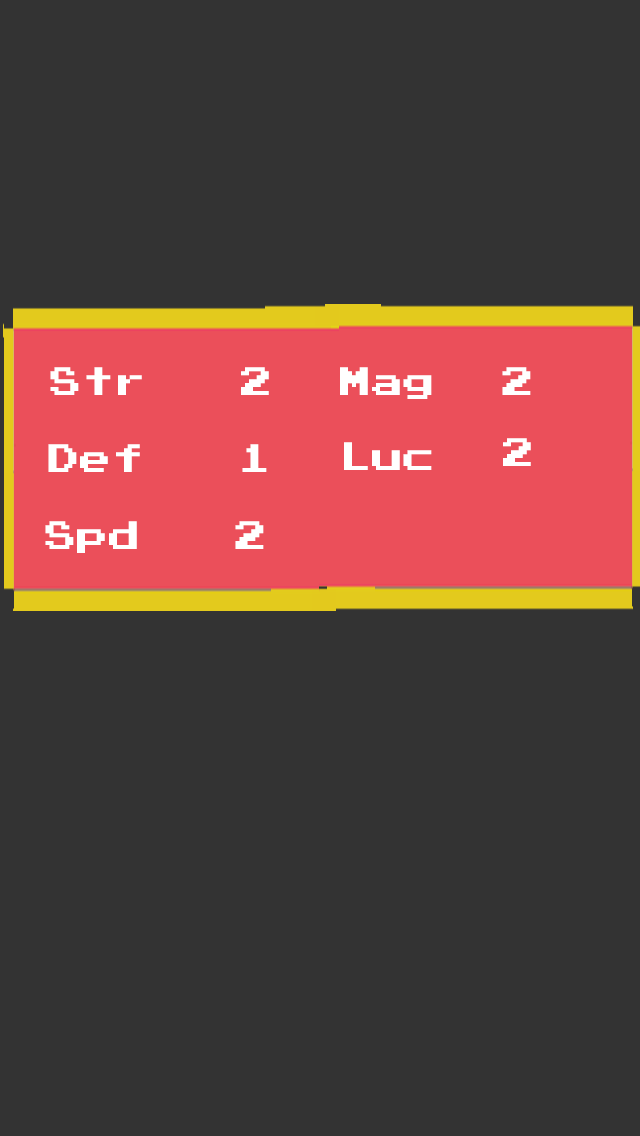
<style>
.page{position:relative;width:640px;height:1136px;background:#333333}
.page>*{position:absolute;margin:0}
.t1{font:31.7px "PressStart2P";color:#ffffff}
</style>
<div class="page">
<p class="t1" style="left:50px;top:367px;width:219px;height:28px">Str   2</p>
<p class="t1" style="left:340px;top:367px;width:92px;height:32px">Mag</p>
<p class="t1" style="left:502px;top:367px;width:29px;height:28px">2</p>
<p class="t1" style="left:503px;top:438px;width:28px;height:28px">2</p>
<p class="t1" style="left:48px;top:444px;width:219px;height:28px">Def   1</p>
<p class="t1" style="left:344px;top:442px;width:88px;height:28px">Luc</p>
<p class="t1" style="left:45px;top:521px;width:219px;height:32px">Spd   2</p>
</div>
